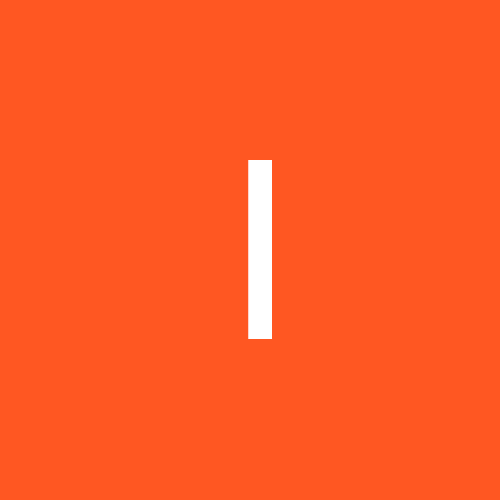
<style>
.page{position:relative;width:500px;height:500px;background:#ff5722}
.page>*{position:absolute;margin:0}
.t1{font:250px "ArialMT";color:#ffffff}
</style>
<div class="page">
<p class="t1" style="left:248px;top:160px;width:24px;height:179px">I</p>
</div>
